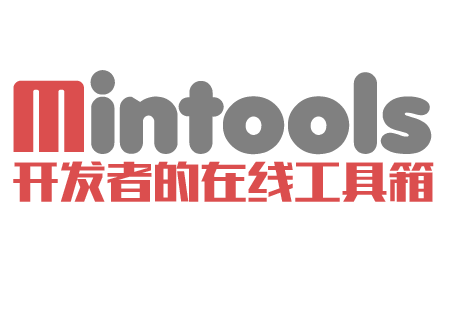
<style>
.page{position:relative;width:450px;height:320px;background:#ffffff}
.page>*{position:absolute;margin:0}
.t1{font:103px "Debussy";color:#808080}
.t2{font:89px "MyPuma";color:#db4e4e}
.t3{font:47px "Tensentype-XiChaoHeiJ";color:#db4e4e}
</style>
<div class="page">
<p class="t1" style="left:90px;top:70px;width:342px;height:85px">intools</p>
<p class="t2" style="left:13px;top:80px;width:71px;height:72px">M</p>
<p class="t3" style="left:13px;top:161px;width:421px;height:41px">开发者的在线工具箱</p>
</div>
